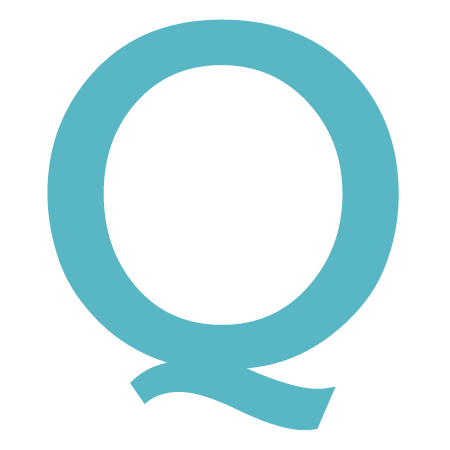
<style>
.page{position:relative;width:450px;height:450px;background:#ffffff}
.page>*{position:absolute;margin:0}
.t1{font:500px "Rockwell";color:#59b7c5}
</style>
<div class="page">
<p class="t1" style="left:47px;top:19px;width:352px;height:411px">Q</p>
</div>
